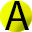
<style>
.page{position:relative;width:32px;height:32px}
.page>*{position:absolute;margin:0}
.t1{font:12px "MyriadPro-Regular";color:#000000}
</style>
<div class="page">
<p class="t1" style="left:5px;top:1px;width:24px;height:29px">A</p>
</div>
